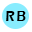
<style>
.page{position:relative;width:32px;height:32px;background:#ffffff}
.page>*{position:absolute;margin:0}
.t1{font:15.3px "ErasITC-Demi";letter-spacing:0.08em;color:#000000}
</style>
<div class="page">
<p class="t1" style="left:6px;top:11px;width:20px;height:10px">RB</p>
</div>
